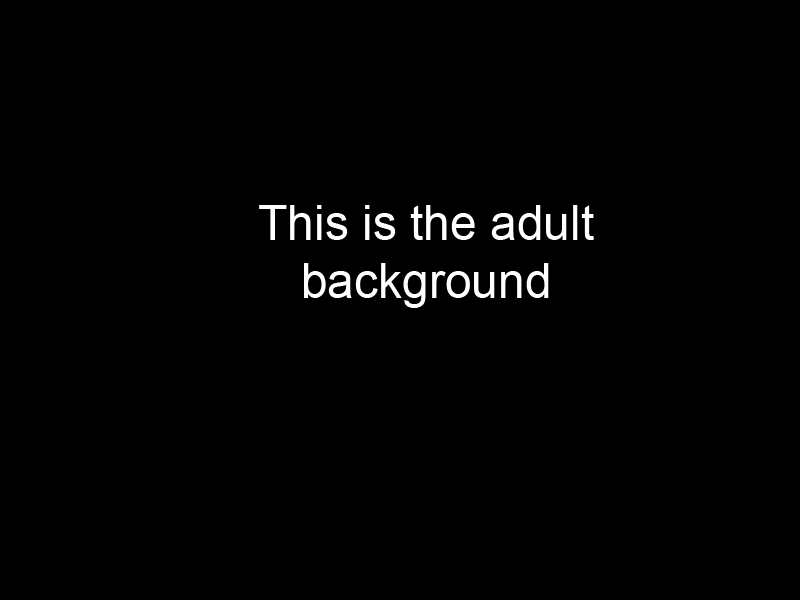
<style>
.page{position:relative;width:800px;height:600px;background:#000000}
.page>*{position:absolute;margin:0}
.t1{font:48px "ArialMT";color:#ffffff}
</style>
<div class="page">
<p class="t1" style="left:259px;top:205px;width:335px;height:103px;text-align:center">This is the adult<br>background</p>
</div>
